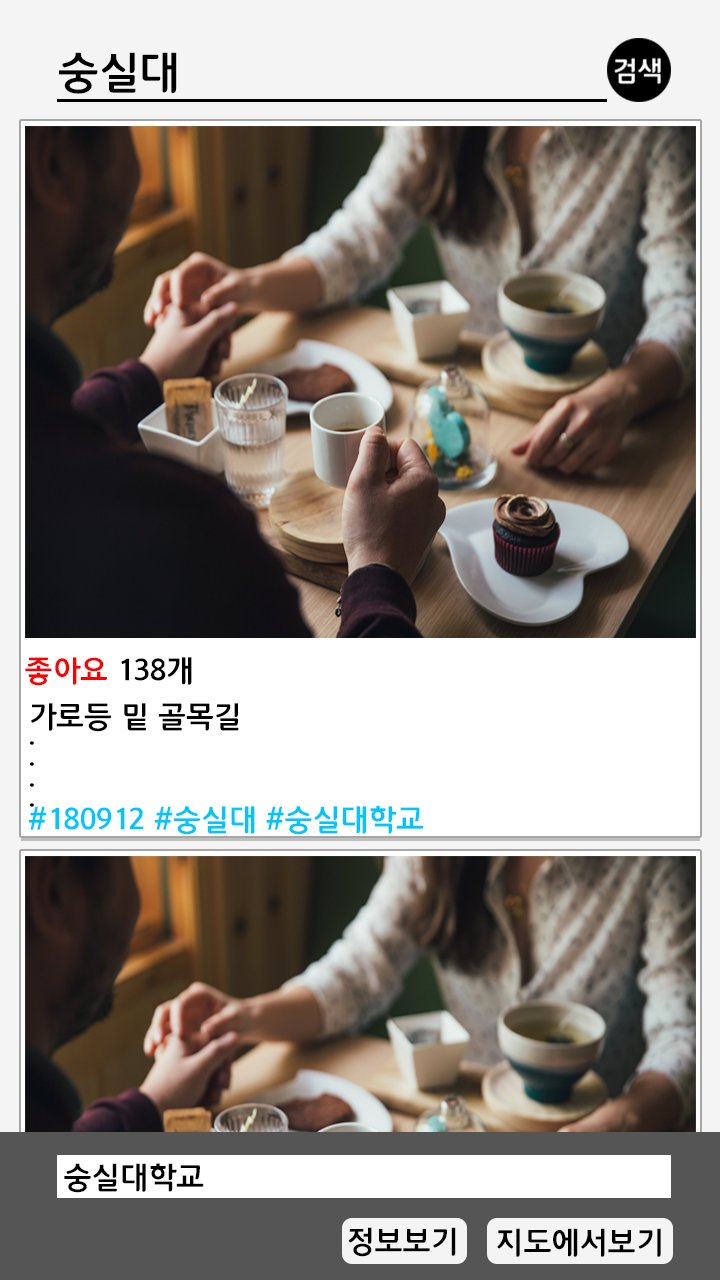
<style>
.page{position:relative;width:720px;height:1280px}
.page>*{position:absolute;margin:0}
.t1{font:45px "12LotteMartDreamBold";color:#000000}
.t2{font:30.9px "12LotteMartDreamBold";color:#000000}
.t3{font:30.9px "12LotteMartDreamBold";color:#ff0000}
.t4{font:30.9px/20.6px "12LotteMartDreamBold";color:#00c6ff}
.t5{font:30.9px/20.6px "12LotteMartDreamBold";color:#000000}
.t6{font:31.2px "12LotteMartDreamBold";color:#000000}
</style>
<div class="page">
<p class="t1" style="left:59px;top:52px;width:118px;height:42px">숭실대</p>
<p class="t2" style="left:25px;top:657px;width:167px;height:29px"><span class="t3">좋아요</span> 138개</p>
<p class="t4" style="left:29px;top:703px;width:394px;height:132px"><span class="t5">가로등 밑 골목길<br>.<br>.<br>.<br>.<br></span>#180912 #숭실대 #숭실대학교</p>
<p class="t6" style="left:64px;top:1163px;width:140px;height:30px">숭실대학교</p>
</div>
